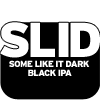
<style>
.page{position:relative;width:100px;height:100px;background:#ffffff}
.page>*{position:absolute;margin:0}
.t1{font:48.9px "Interstate-Black";letter-spacing:-0.1em;color:#ffffff}
.t2{font:48.9px "Interstate-Black";letter-spacing:-0.08em;color:#ffffff}
.t3{font:48.9px "Interstate-Black";letter-spacing:-0.06em;color:#ffffff}
.t4{font:9.1px "Interstate-Black";letter-spacing:-0.08em;color:#ffffff}
</style>
<div class="page">
<p class="t1" style="left:0px;top:22px;width:100px;height:36px"><span class="t2">S</span><span class="t3">L</span>ID</p>
<p class="t4" style="left:9px;top:60px;width:81px;height:7px">SOME LIKE IT DARK</p>
<p class="t4" style="left:28px;top:69px;width:44px;height:7px">BLACK IPA</p>
</div>
